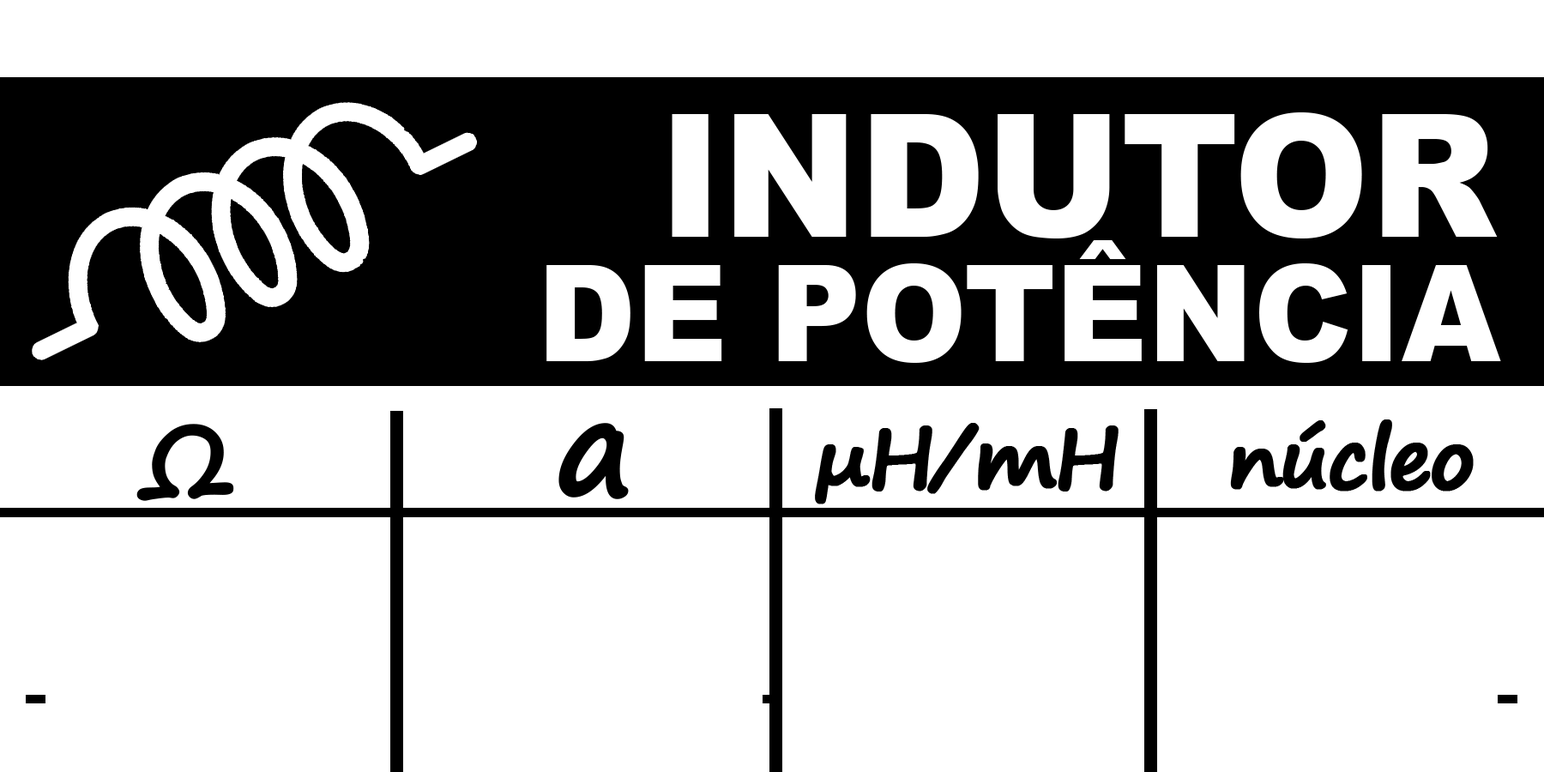
<style>
.page{position:relative;width:1544px;height:772px;background:#ffffff}
.page>*{position:absolute;margin:0}
.t1{font:171.6px "Arial-Black";color:#ffffff;scale:0.95 1}
.t2{font:133.5px "Arial-Black";color:#ffffff;scale:0.95 1}
.t3{font:98.7px "SegoePrint-Bold";letter-spacing:-0.15em;color:#000000;font-weight:bold}
.t4{font:132.4px "SegoePrint-Bold";letter-spacing:-0.15em;color:#000000;font-weight:bold}
.t5{font:83.2px "SegoePrint-Bold";letter-spacing:-0.075em;color:#000000;font-weight:bold}
.t6{font:81.7px "SegoePrint-Bold";letter-spacing:-0.05em;color:#000000;font-weight:bold}
</style>
<div class="page">
<p class="t1" style="left:672px;top:112px;width:826px;height:127px">INDUTOR</p>
<p class="t2" style="left:547px;top:240px;width:954px;height:123px">DE POTÊNCIA</p>
<p class="t3" style="left:136px;top:424px;width:98px;height:77px">Ω</p>
<p class="t4" style="left:559px;top:423px;width:70px;height:76px">a</p>
<p class="t5" style="left:815px;top:423px;width:304px;height:81px">µH/mH</p>
<p class="t6" style="left:1230px;top:420px;width:244px;height:72px">núcleo</p>
</div>
